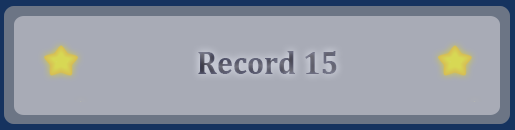
<style>
.page{position:relative;width:515px;height:130px;background:#a8abb6}
.page>*{position:absolute;margin:0}
.t1{font:33.3px "Cambria-Bold";color:#626372;scale:0.9 1}
</style>
<div class="page">
<p class="t1" style="left:198px;top:51px;width:139px;height:23px">Record 15</p>
</div>
